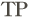
<style>
.page{position:relative;width:33px;height:18px;background:#ffffff}
.page>*{position:absolute;margin:0}
.t1{font:20px "RyuminPro-ExBold";letter-spacing:-0.08em;color:#4c4841}
</style>
<div class="page">
<p class="t1" style="left:0px;top:1px;width:28px;height:16px">TP</p>
</div>
